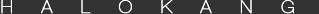
<style>
.page{position:relative;width:319px;height:14px;background:#333333}
.page>*{position:absolute;margin:0}
.t1{font:18.2px "HelveticaNeueLTStd-UltLt";letter-spacing:1.53em;color:#ffffff;font-weight:bold}
</style>
<div class="page">
<p class="t1" style="left:1px;top:0px;width:293px;height:14px">HALOKANG</p>
</div>
